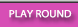
<style>
.page{position:relative;width:78px;height:27px;background:#d74eb5}
.page>*{position:absolute;margin:0}
.t1{font:10.4px "MyriadPro-Regular";color:#ffffff;scale:1.08 1}
</style>
<div class="page">
<p class="t1" style="left:9px;top:10px;width:63px;height:8px">PLAY ROUND</p>
</div>
